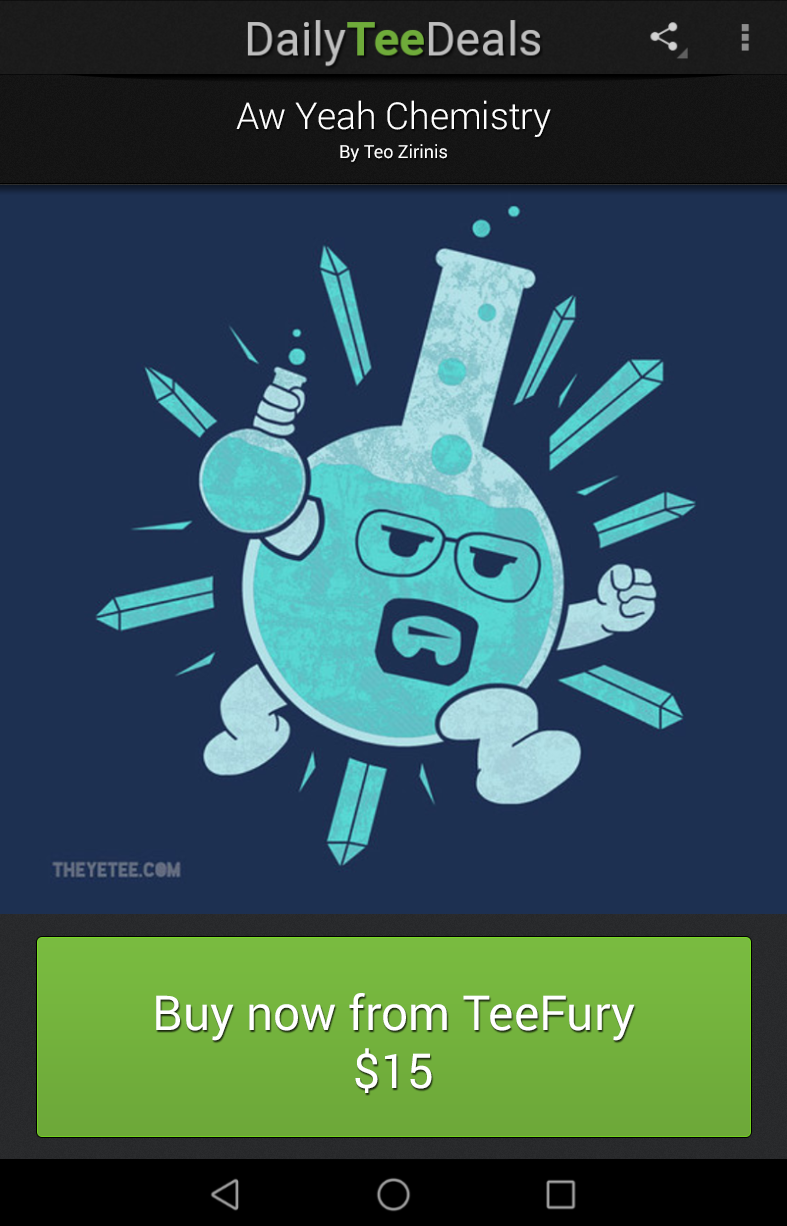
<style>
.page{position:relative;width:787px;height:1226px;background:#1d3051}
.page>*{position:absolute;margin:0}
.t1{font:37px "Roboto-Light";color:#ffffff}
.t2{font:18px "Roboto-Regular";color:#ffffff}
.t3{font:48px "Roboto-Regular";color:#ffffff}
</style>
<div class="page">
<p class="t1" style="left:236px;top:100px;width:315px;height:37px">Aw Yeah Chemistry</p>
<p class="t2" style="left:340px;top:144px;width:107px;height:18px">By Teo Zirinis</p>
<p class="t3" style="left:156px;top:993px;width:479px;height:100px;text-align:center">Buy now from TeeFury<br>$15</p>
</div>
